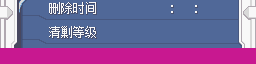
<style>
.page{position:relative;width:256px;height:64px;background:#506898}
.page>*{position:absolute;margin:0}
.t1{font:12px "SimSun";color:#f8f8f8}
</style>
<div class="page">
<p class="t1" style="left:49px;top:2px;width:47px;height:12px">删除时间</p>
<p class="t1" style="left:49px;top:26px;width:47px;height:12px">清剿等级</p>
</div>
